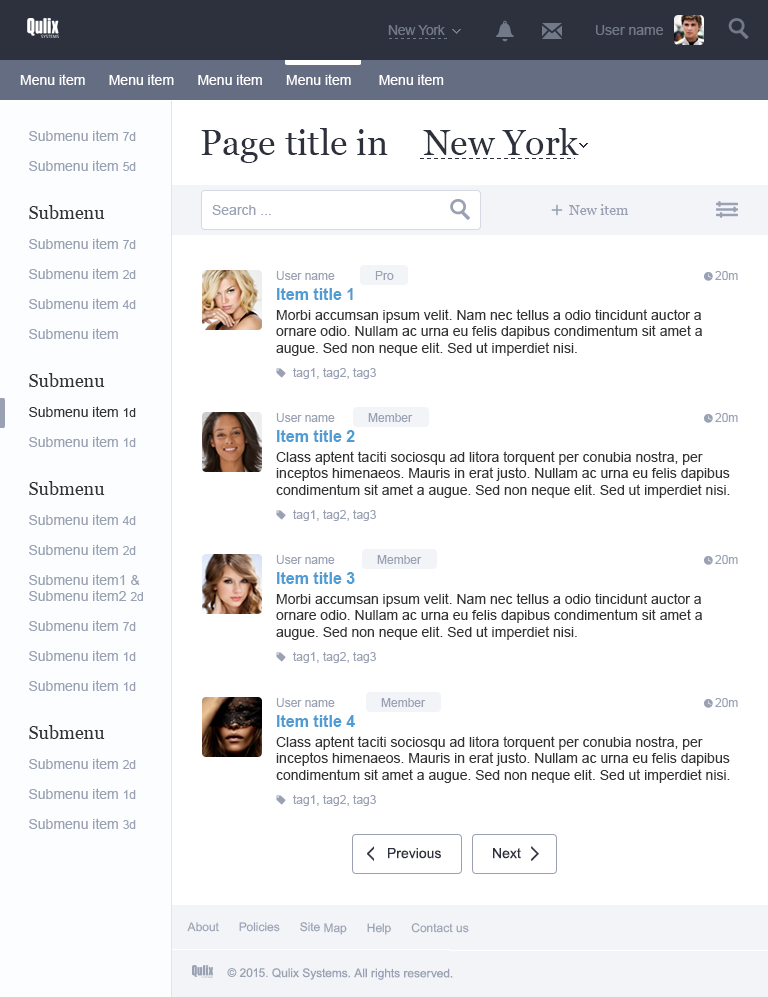
<style>
.page{position:relative;width:768px;height:997px;background:#ffffff}
.page>*{position:absolute;margin:0}
.t1{font:14px "ArialMT";letter-spacing:-0.025em;color:#646d81}
.t2{font:14px "ArialMT";color:#646d81}
.t3{font:14px "ArialMT";color:#ffffff}
.t4{font:14px/30px "ArialMT";color:#99a1b3}
.t5{font:12px/30px "ArialMT";color:#99a1b3}
.t6{font:18px/48px "Georgia";color:#333333}
.t7{font:14px/30px "ArialMT";color:#333333}
.t8{font:12px/30px "ArialMT";color:#333333}
.t9{font:14px "ArialMT";color:#99a1b3}
.t10{font:12px "ArialMT";color:#99a1b3}
.t11{font:36px "Georgia";color:#2d313d}
.t12{font:14px "Georgia";color:#99a1b3}
.t13{font:14px "ArialMT";color:#333333}
.t14{font:16px/20px "Arial-BoldMT";color:#4f9cd4}
.t15{font:14px/20px "ArialMT";color:#333333}
.t16{font:14px "ArialMT";color:#2d313d}
</style>
<div class="page">
<p class="t1" style="left:388px;top:25px;width:57px;height:10px">New York</p>
<p class="t2" style="left:596px;top:25px;width:67px;height:10px">User name</p>
<p class="t3" style="left:20px;top:74px;width:424px;height:11px">Menu item      Menu item      Menu item      Menu item       Menu item</p>
<p class="t4" style="left:29px;top:130px;width:114px;height:699px">Submenu item <span class="t5">7d<br></span>Submenu item <span class="t5">5d<br></span><span class="t6">Submenu<br></span>Submenu item <span class="t5">7d<br></span>Submenu item <span class="t5">2d<br></span>Submenu item <span class="t5">4d<br></span>Submenu item<br><span class="t6">Submenu<br></span><span class="t7">Submenu item </span><span class="t8">1d<br></span>Submenu item <span class="t5">1d<br></span><span class="t6">Submenu<br></span>Submenu item <span class="t5">4d<br></span>Submenu item <span class="t5">2d<br></span>Submenu item1 &amp;<br><span class="t9">Submenu item2 </span><span class="t10">2d<br></span>Submenu item <span class="t5">7d<br></span>Submenu item <span class="t5">1d<br></span>Submenu item <span class="t5">1d<br></span><span class="t6">Submenu<br></span>Submenu item <span class="t5">2d<br></span>Submenu item <span class="t5">1d<br></span>Submenu item <span class="t5">3d</span></p>
<p class="t11" style="left:201px;top:128px;width:378px;height:35px">Page title in    New York</p>
<p class="t9" style="left:212px;top:205px;width:59px;height:10px">Search ...</p>
<p class="t12" style="left:569px;top:204px;width:60px;height:11px">New item</p>
<p class="t13" style="left:276px;top:271px;width:426px;height:85px"><span class="t10">User name<br></span><span class="t14">Item title 1<br></span><span class="t15">Morbi accumsan ipsum velit. Nam nec tellus a odio tincidunt auctor a </span>ornare odio. Nullam ac urna eu felis dapibus condimentum sit amet a augue. Sed non neque elit. Sed ut imperdiet nisi.</p>
<p class="t10" style="left:375px;top:271px;width:19px;height:9px">Pro</p>
<p class="t10" style="left:715px;top:271px;width:23px;height:9px">20m</p>
<p class="t10" style="left:293px;top:368px;width:83px;height:11px">tag1, tag2, tag3</p>
<p class="t13" style="left:276px;top:413px;width:454px;height:85px"><span class="t10">User name<br></span><span class="t14">Item title 2<br></span><span class="t15">Class aptent taciti sociosqu ad litora torquent per conubia nostra, per </span>inceptos himenaeos. Mauris in erat justo. Nullam ac urna eu felis dapibus condimentum sit amet a augue. Sed non neque elit. Sed ut imperdiet nisi.</p>
<p class="t10" style="left:368px;top:413px;width:45px;height:9px">Member</p>
<p class="t10" style="left:715px;top:413px;width:23px;height:9px">20m</p>
<p class="t10" style="left:293px;top:510px;width:83px;height:11px">tag1, tag2, tag3</p>
<p class="t13" style="left:276px;top:555px;width:426px;height:85px"><span class="t10">User name<br></span><span class="t14">Item title 3<br></span><span class="t15">Morbi accumsan ipsum velit. Nam nec tellus a odio tincidunt auctor a </span>ornare odio. Nullam ac urna eu felis dapibus condimentum sit amet a augue. Sed non neque elit. Sed ut imperdiet nisi.</p>
<p class="t10" style="left:377px;top:555px;width:45px;height:9px">Member</p>
<p class="t10" style="left:715px;top:555px;width:23px;height:9px">20m</p>
<p class="t10" style="left:293px;top:652px;width:83px;height:11px">tag1, tag2, tag3</p>
<p class="t13" style="left:276px;top:698px;width:454px;height:85px"><span class="t10">User name<br></span><span class="t14">Item title 4<br></span><span class="t15">Class aptent taciti sociosqu ad litora torquent per conubia nostra, per </span>inceptos himenaeos. Mauris in erat justo. Nullam ac urna eu felis dapibus condimentum sit amet a augue. Sed non neque elit. Sed ut imperdiet nisi.</p>
<p class="t10" style="left:381px;top:698px;width:45px;height:9px">Member</p>
<p class="t10" style="left:715px;top:698px;width:23px;height:9px">20m</p>
<p class="t10" style="left:293px;top:795px;width:83px;height:11px">tag1, tag2, tag3</p>
<p class="t16" style="left:388px;top:848px;width:53px;height:11px">Previous</p>
<p class="t16" style="left:493px;top:848px;width:28px;height:11px">Next</p>
<p class="t10" style="left:187px;top:922px;width:282px;height:13px">About      Policies      Site Map      Help      Contact us</p>
<p class="t10" style="left:227px;top:968px;width:226px;height:12px">© 2015. Qulix Systems. All rights reserved.</p>
</div>
